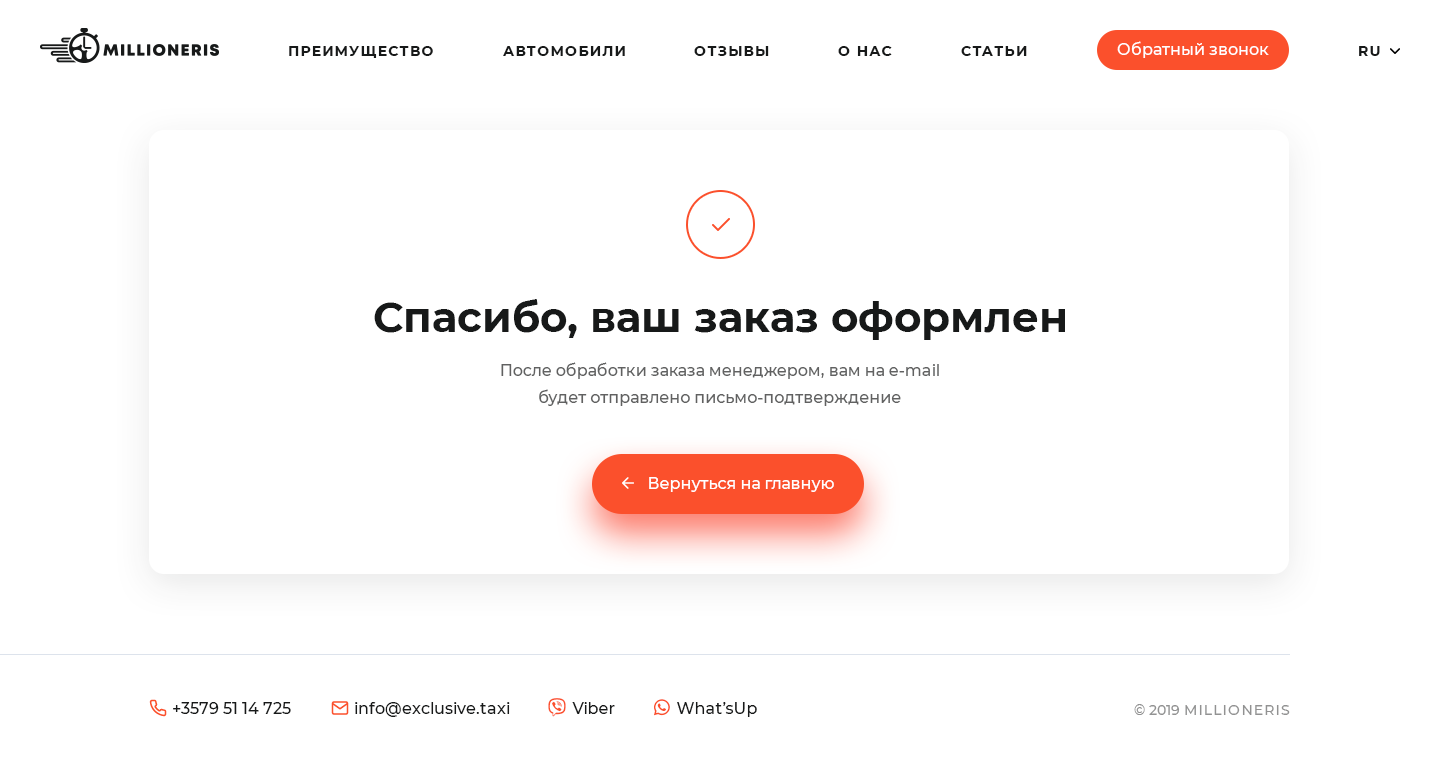
<style>
.page{position:relative;width:1440px;height:761px;background:#ffffff}
.page>*{position:absolute;margin:0}
.t1{font:16px "Montserrat-Medium";color:#ffffff}
.t2{font:14px "Montserrat-Bold";letter-spacing:0.1em;color:#171919;text-transform:uppercase}
.t3{font:42px "Montserrat-Bold";color:#171919}
.t4{font:16px/27px "Montserrat-Medium";color:#616161}
.t5{font:16px "Montserrat-Medium";color:#171919}
.t6{font:14px "Montserrat-Medium";letter-spacing:0.1em;color:#929292}
.t7{font:14px "Montserrat-Medium";color:#929292}
</style>
<div class="page">
<p class="t1" style="left:1117px;top:41px;width:152px;height:17px">Обратный звонок</p>
<p class="t2" style="left:289px;top:46px;width:144px;height:12px">Преимущество</p>
<p class="t2" style="left:503px;top:46px;width:122px;height:10px">Автомобили</p>
<p class="t2" style="left:694px;top:46px;width:75px;height:10px">Отзывы</p>
<p class="t2" style="left:838px;top:46px;width:54px;height:10px">О нас</p>
<p class="t2" style="left:961px;top:46px;width:66px;height:10px">Статьи</p>
<p class="t2" style="left:1359px;top:46px;width:21px;height:10px">RU</p>
<p class="t3" style="left:374px;top:299px;width:691px;height:41px">Спасибо, ваш заказ оформлен</p>
<p class="t4" style="left:501px;top:362px;width:438px;height:44px;text-align:center">После обработки заказа менеджером, вам на e-mail <br>будет отправлено письмо-подтверждение</p>
<p class="t1" style="left:649px;top:477px;width:185px;height:15px">Вернуться на главную</p>
<p class="t5" style="left:173px;top:702px;width:118px;height:12px">+3579 51 14 725</p>
<p class="t5" style="left:355px;top:702px;width:155px;height:15px">info@exclusive.taxi</p>
<p class="t6" style="left:1134px;top:704px;width:156px;height:11px"><span class="t7">© 2019 </span>MILLIONERIS</p>
</div>
